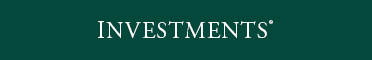
<style>
.page{position:relative;width:372px;height:60px;background:#03483a}
.page>*{position:absolute;margin:0}
.t1{font:22.9px "AGaramondPro-Regular";letter-spacing:0.05em;color:#ffffff}
.t2{font:25.2px "AGaramondPro-Regular";letter-spacing:0.05em;color:#ffffff;scale:0.91 1}
.t3{font:24px "AGaramondPro-Regular";letter-spacing:0.005em;color:#ffffff}
</style>
<div class="page">
<p class="t1" style="left:98px;top:20px;width:175px;height:18px"><span class="t2">I</span>NVESTMENTS<span class="t3">®</span></p>
</div>
